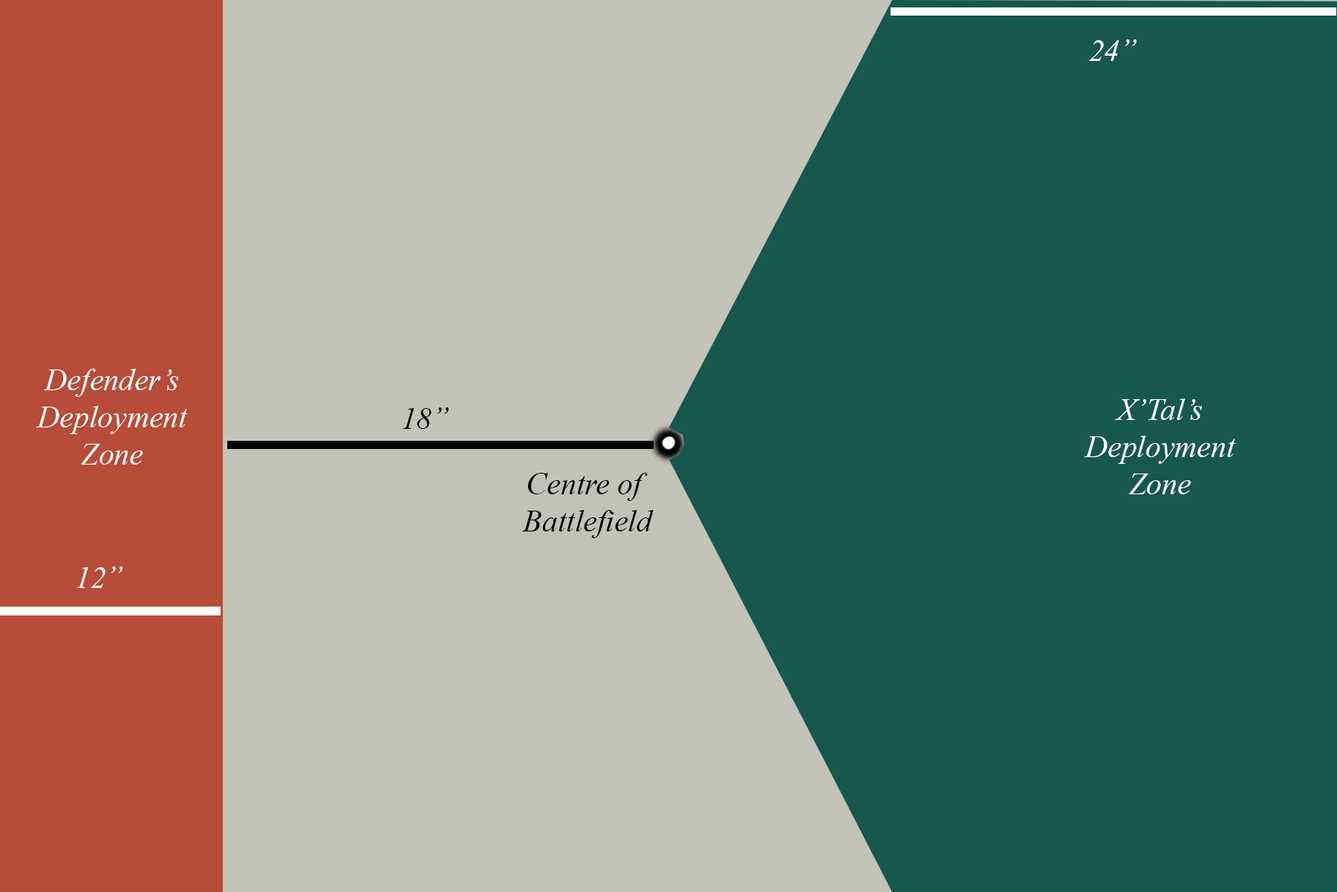
<style>
.page{position:relative;width:1337px;height:892px;background:#16584e}
.page>*{position:absolute;margin:0}
.t1{font:31px "TimesNewRomanPS-ItalicMT";color:#ffffff}
.t2{font:31px "TimesNewRomanPS-ItalicMT";color:#010101}
.t3{font:31px "TimesNewRomanPS-ItalicMT";color:#000000}
</style>
<div class="page">
<p class="t1" style="left:1089px;top:39px;width:48px;height:22px">24”</p>
<p class="t1" style="left:36px;top:369px;width:152px;height:95px;text-align:center">Defender’s<br>Deployment<br>Zone</p>
<p class="t1" style="left:1084px;top:398px;width:152px;height:96px;text-align:center">X’Tal’s<br>Deployment<br>Zone</p>
<p class="t2" style="left:403px;top:407px;width:46px;height:22px">18”</p>
<p class="t3" style="left:522px;top:473px;width:132px;height:65px;text-align:center">Centre of <br>Battlefield</p>
<p class="t1" style="left:77px;top:566px;width:46px;height:22px">12”</p>
</div>
